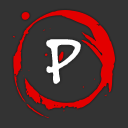
<style>
.page{position:relative;width:128px;height:128px;background:#333333}
.page>*{position:absolute;margin:0}
.t1{font:71.9px "BuxtonSketch";color:#ffffff}
</style>
<div class="page">
<p class="t1" style="left:46px;top:39px;width:35px;height:45px">P</p>
</div>
